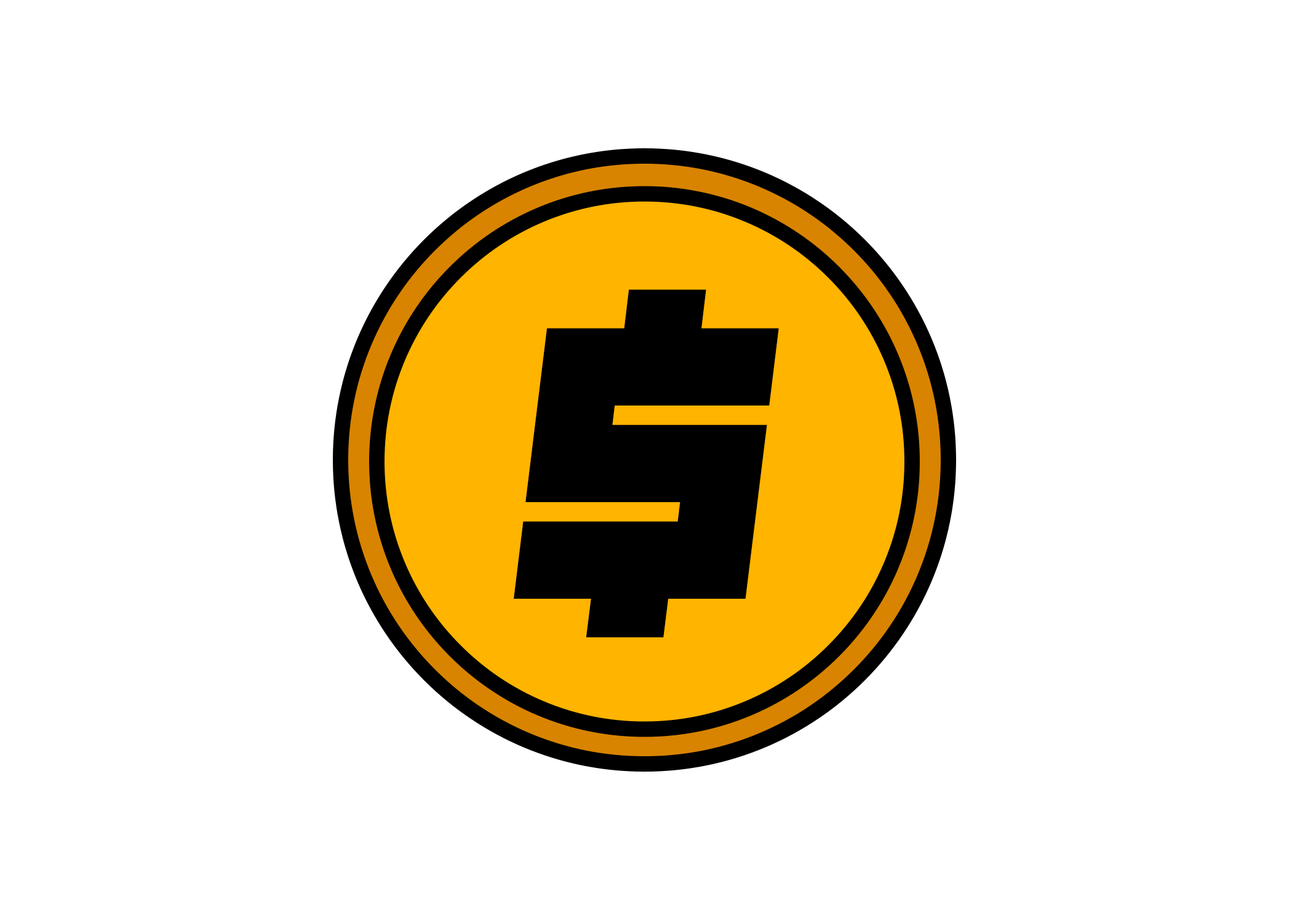
<style>
.page{position:relative;width:1292px;height:923px;background:#ffffff}
.page>*{position:absolute;margin:0}
.t1{font:395.7px "NauSea";color:#000000}
</style>
<div class="page">
<p class="t1" style="left:514px;top:289px;width:265px;height:348px">$</p>
</div>
